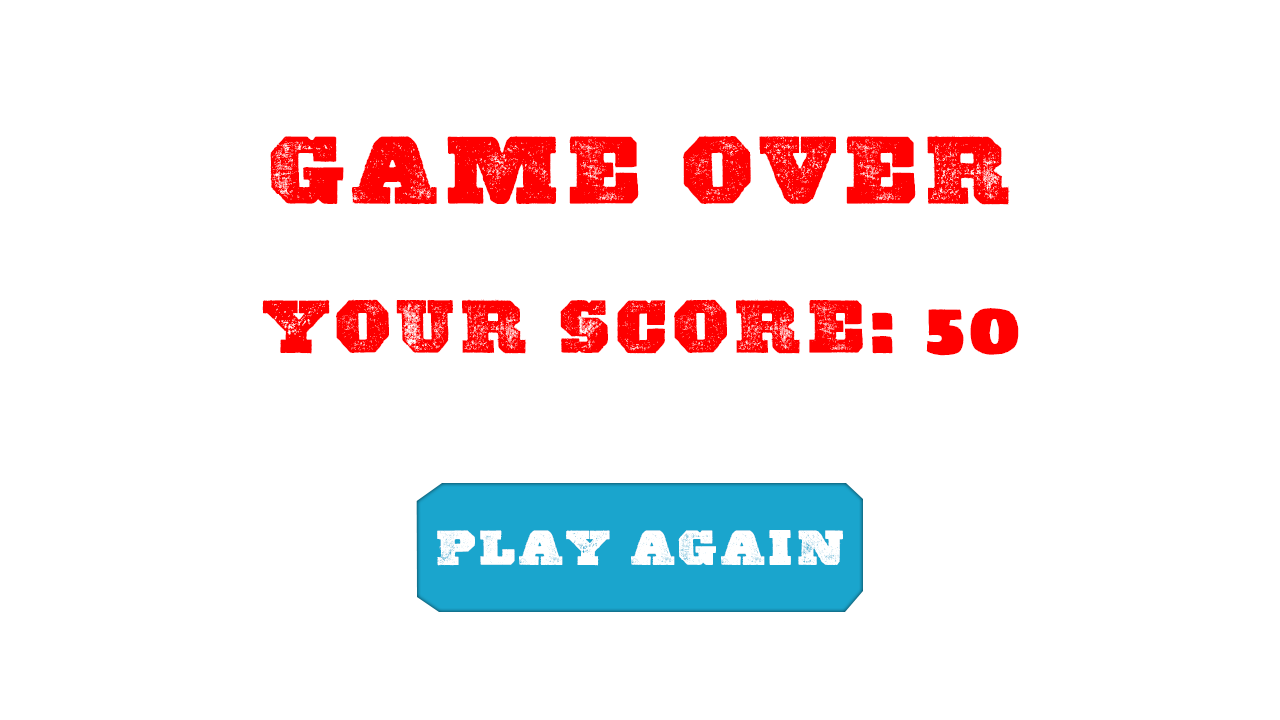
<style>
.page{position:relative;width:1280px;height:720px;background:#ffffff}
.page>*{position:absolute;margin:0}
.t1{font:95.4px "AshwoodExtraBoldWF";color:#ff0000}
.t2{font:74.8px "AshwoodExtraBoldWF";color:#ff0000}
.t3{font:74.8px "SigmarOne";color:#ff0000}
.t4{font:48.9px "AshwoodExtraBoldWF";color:#ffffff}
</style>
<div class="page">
<p class="t1" style="left:270px;top:135px;width:740px;height:70px">Game Over</p>
<p class="t2" style="left:262px;top:299px;width:757px;height:57px">Your Score<span class="t3">: 50</span></p>
<p class="t4" style="left:437px;top:530px;width:406px;height:36px">Play Again</p>
</div>
